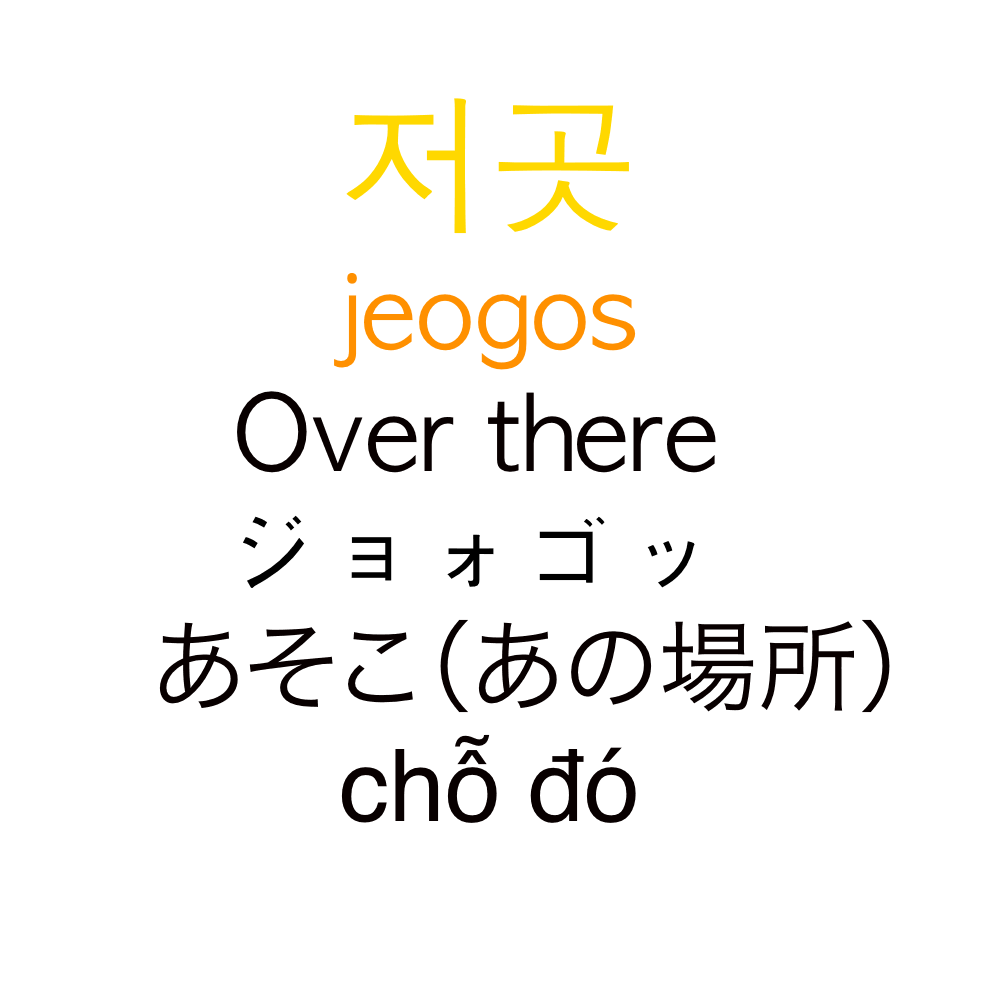
<style>
.page{position:relative;width:1000px;height:1000px;background:#ffffff}
.page>*{position:absolute;margin:0}
.t1{font:150px "AppleGothic";color:#ffd800}
.t2{font:100px "AppleGothic";color:#ff9000}
.t3{font:100px "AppleGothic";color:#080000}
.t4{font:100px "AppleGothic";color:#000000}
.t5{font:100px "HiraKakuProN-W3";color:#080000}
.t6{font:100px "Helvetica";color:#080000}
</style>
<div class="page">
<p class="t1" style="left:346px;top:98px;width:283px;height:136px">저곳</p>
<p class="t2" style="left:334px;top:273px;width:302px;height:97px">jeogos</p>
<p class="t3" style="left:237px;top:391px;width:479px;height:82px">Over there</p>
<p class="t4" style="left:243px;top:515px;width:452px;height:73px">ジョォゴッ</p>
<p class="t5" style="left:159px;top:619px;width:731px;height:94px">あそこ（あの場所）</p>
<p class="t6" style="left:341px;top:734px;width:295px;height:89px">chỗ đó</p>
</div>
